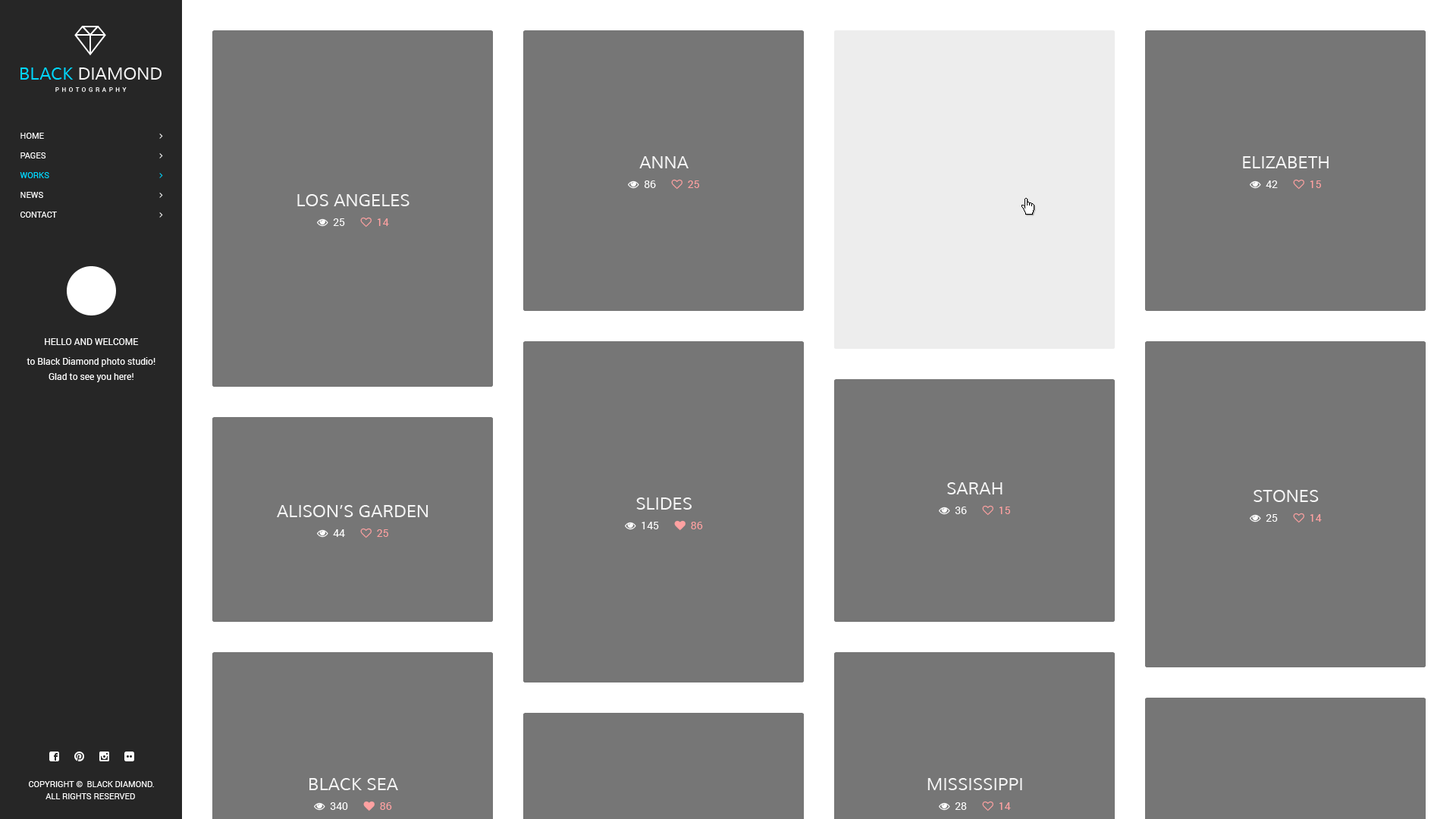
<style>
.page{position:relative;width:1456px;height:819px;background:#767676}
.page>*{position:absolute;margin:0}
.t1{font:8.3px/19.7px "Roboto-Regular";color:#ffffff;text-transform:uppercase}
.t2{font:8.3px/19.7px "Roboto-Regular";color:#00d8ff;text-transform:uppercase}
.t3{font:16.7px "Muli";color:#f6f6f6;text-transform:uppercase}
.t4{font:9.1px/15.2px "Roboto-Regular";color:#ffffff}
.t5{font:9.1px/15.2px "Roboto-Regular";color:#ffffff;text-transform:uppercase}
.t6{font:9.1px/19.7px "Roboto-Regular";color:#ffffff}
.t7{font:8.3px/12.1px "Roboto-Regular";color:#ffffff;text-transform:uppercase}
</style>
<div class="page">
<p class="t1" style="left:20px;top:133px;width:37px;height:85px">home<br>Pages<br><span class="t2">Works<br></span>News<br>Contact</p>
<p class="t3" style="left:639px;top:156px;width:50px;height:12px">Anna</p>
<p class="t3" style="left:1243px;top:156px;width:86px;height:12px">Elizabeth</p>
<p class="t3" style="left:297px;top:194px;width:112px;height:12px">Los Angeles</p>
<p class="t4" style="left:27px;top:338px;width:128px;height:44px;text-align:center"><span class="t5">Hello And Welcome<br></span><span class="t6">t</span>o Black Diamond photo studio!<br>Glad to see you here!</p>
<p class="t3" style="left:947px;top:482px;width:56px;height:12px">Sarah</p>
<p class="t3" style="left:636px;top:497px;width:56px;height:13px">Slides</p>
<p class="t3" style="left:1254px;top:490px;width:65px;height:12px">Stones</p>
<p class="t3" style="left:277px;top:505px;width:151px;height:12px">Alison’s Garden</p>
<p class="t7" style="left:29px;top:781px;width:125px;height:18px;text-align:center">Copyright ©  Black Diamond.<br>All Rights Reserved</p>
<p class="t3" style="left:309px;top:778px;width:89px;height:12px">Black Sea</p>
<p class="t3" style="left:927px;top:778px;width:95px;height:12px">Mississippi</p>
</div>
